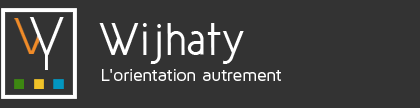
<style>
.page{position:relative;width:420px;height:108px;background:#333333}
.page>*{position:absolute;margin:0}
.t1{font:75px "NewCicle-Fina"}
.t2{font:47.3px "NewCicle-Gordita";color:#ffffff}
.t3{font:17.7px "MavenProRegular";letter-spacing:-0.01em;color:#ffffff}
</style>
<div class="page">
<p class="t1" style="left:14px;top:17px;width:50px;height:38px">w</p>
<p class="t2" style="left:99px;top:23px;width:145px;height:41px">Wijhaty</p>
<p class="t3" style="left:102px;top:69px;width:179px;height:12px">L'orientation autrement</p>
</div>
